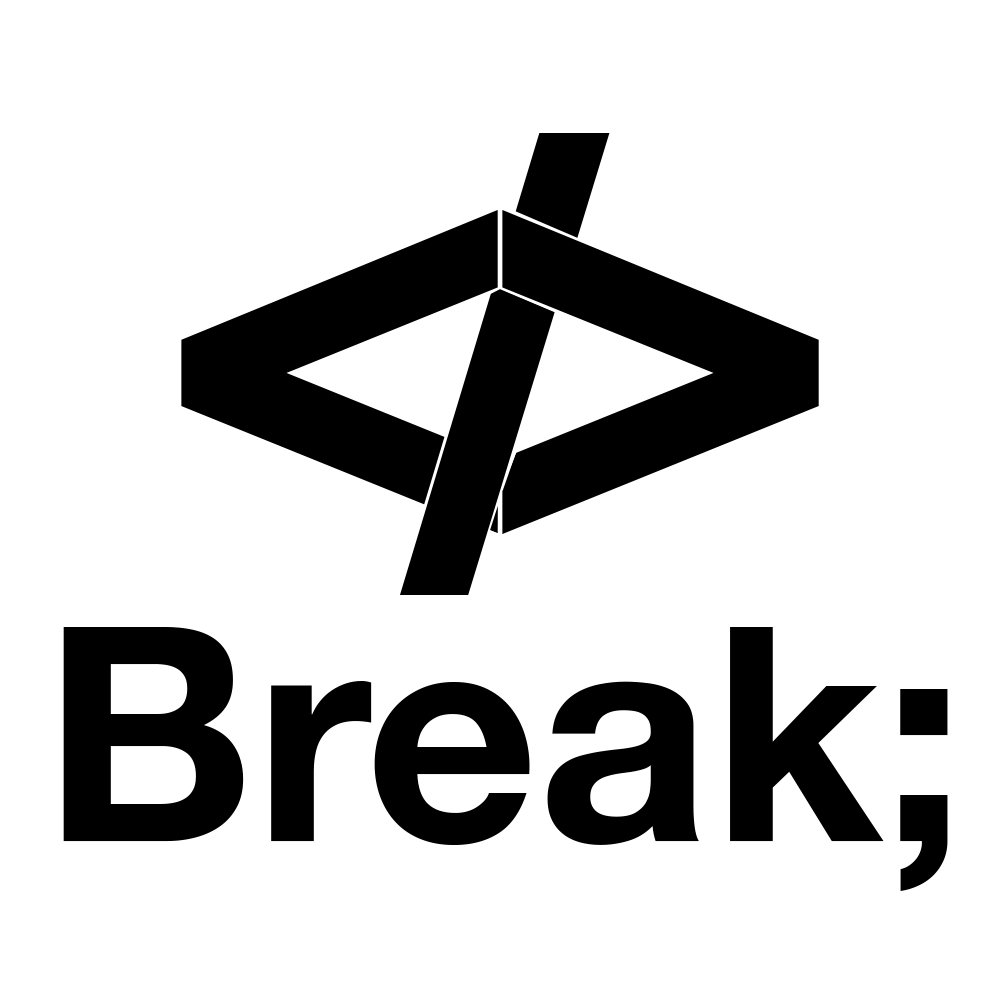
<style>
.page{position:relative;width:1000px;height:1000px;background:#ffffff}
.page>*{position:absolute;margin:0}
.t1{font:300px "HelveticaNeue-Bold";color:#000000}
</style>
<div class="page">
<p class="t1" style="left:63px;top:627px;width:885px;height:264px">Break;</p>
</div>
